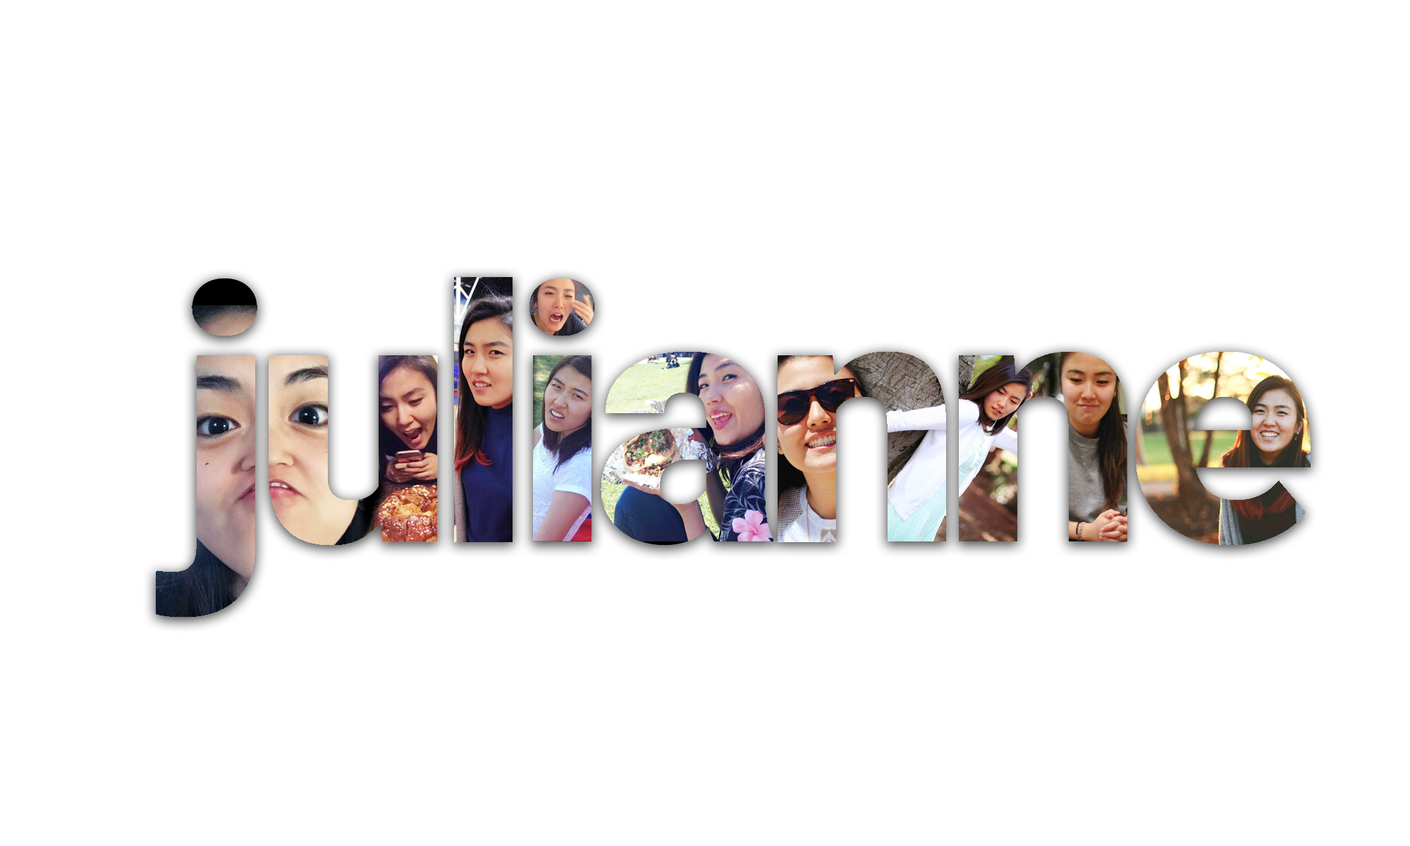
<style>
.page{position:relative;width:1410px;height:846px;background:#ffffff}
.page>*{position:absolute;margin:0}
.t1{font:352.4px "Roboto-Black";letter-spacing:-0.05em}
</style>
<div class="page">
<p class="t1" style="left:156px;top:277px;width:1154px;height:340px">julianne</p>
<p class="t1" style="left:156px;top:277px;width:1154px;height:340px">julianne</p>
</div>
